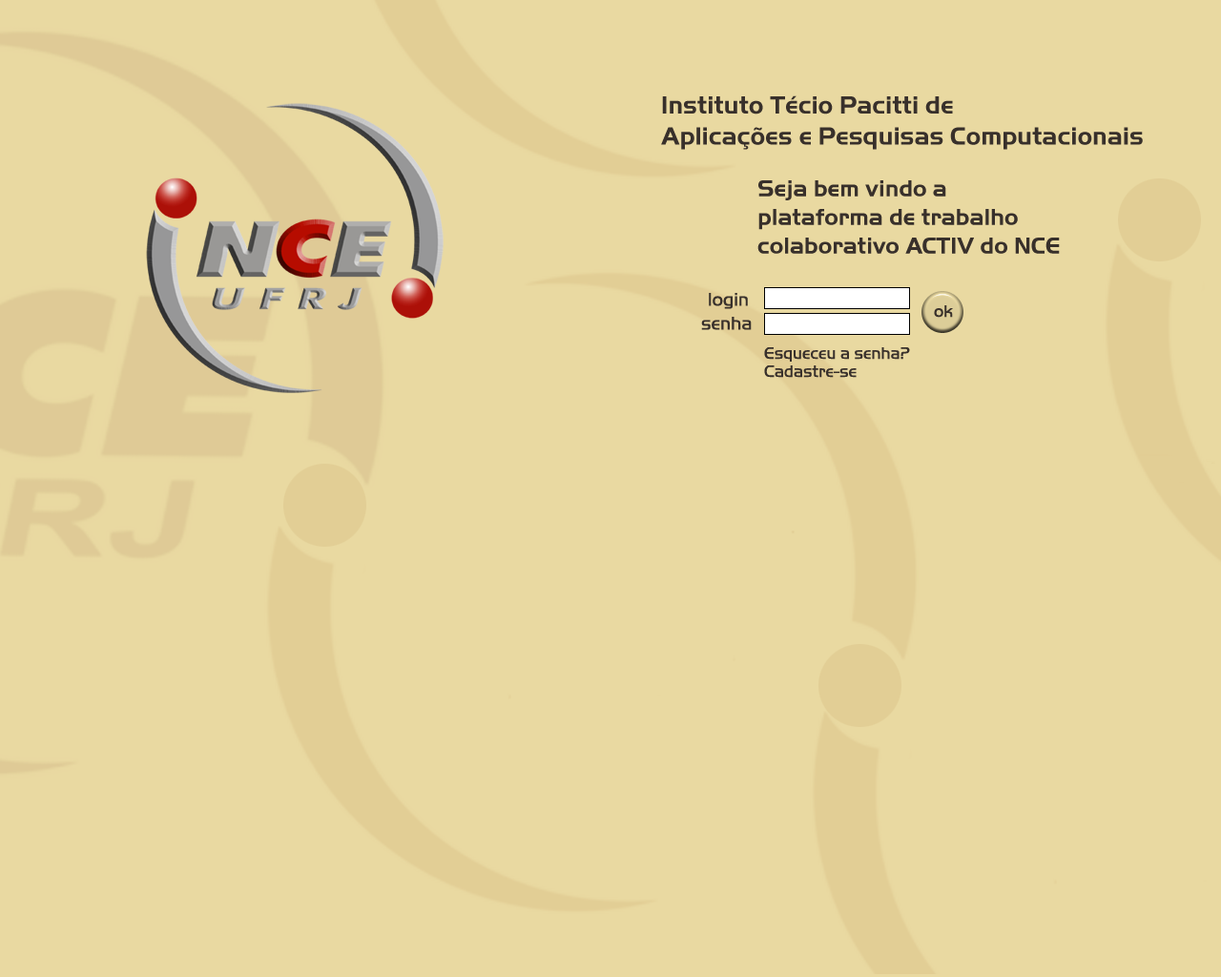
<style>
.page{position:relative;width:1221px;height:977px;background:#e9d9a1}
.page>*{position:absolute;margin:0}
.t1{font:25.8px "HandelGotD-Bold";color:#38302b}
.t2{font:23.8px "HandelGotD-Bold";color:#38302b}
.t3{font:19.1px "HandelGotD-Ligh";color:#38302b}
.t4{font:17.2px "HandelGotD-Ligh";color:#38302b}
</style>
<div class="page">
<p class="t1" style="left:661px;top:95px;width:482px;height:55px">Instituto Técio Pacitti de <br>Aplicações e Pesquisas Computacionais</p>
<p class="t2" style="left:757px;top:180px;width:303px;height:74px">Seja bem vindo a <br>plataforma de trabalho colaborativo ACTIV do NCE</p>
<p class="t3" style="left:709px;top:293px;width:39px;height:16px">login</p>
<p class="t3" style="left:701px;top:317px;width:51px;height:13px">senha</p>
<p class="t4" style="left:764px;top:347px;width:146px;height:14px">Esqueceu a senha?</p>
<p class="t4" style="left:764px;top:365px;width:93px;height:13px">Cadastre-se</p>
</div>
